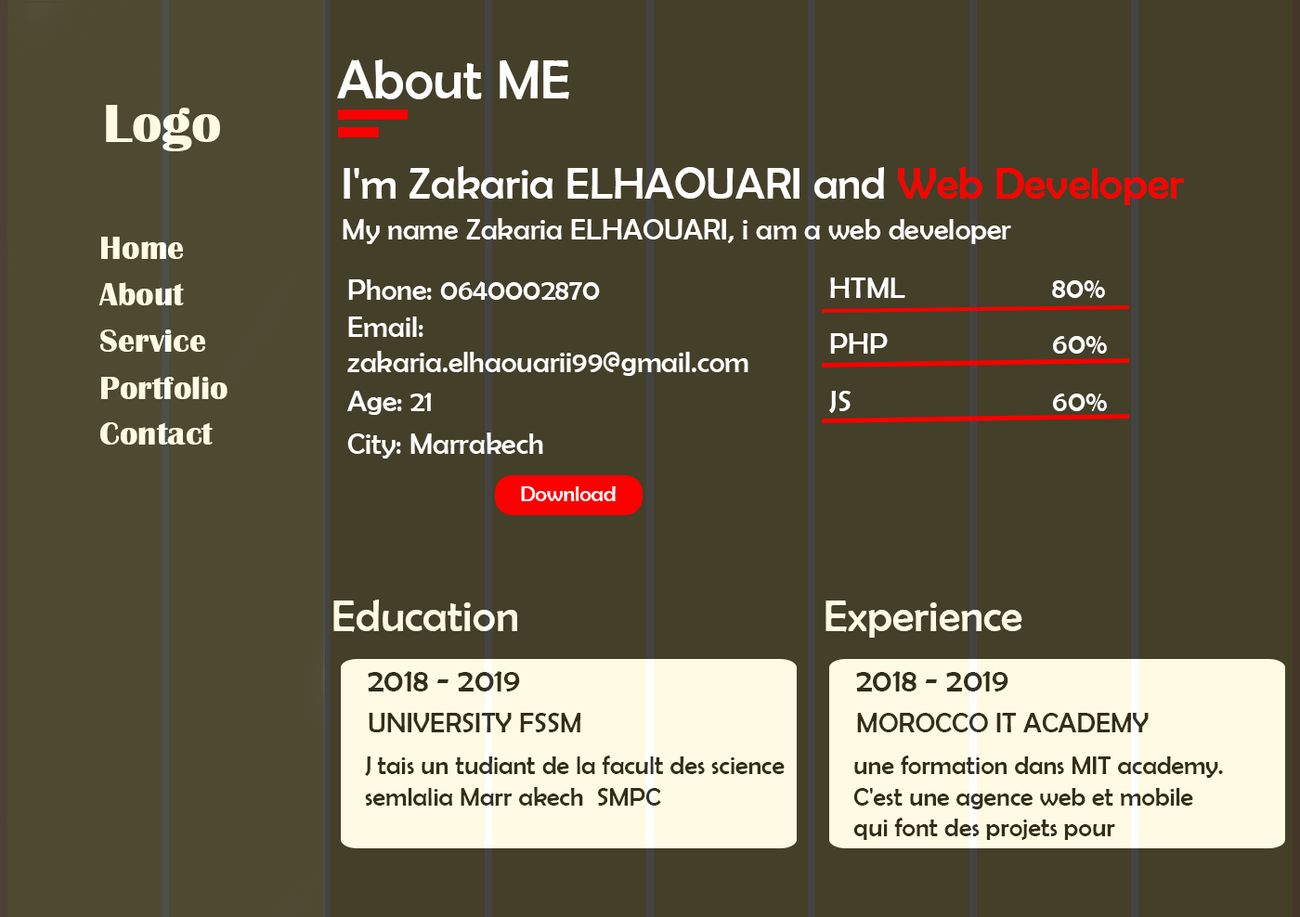
<style>
.page{position:relative;width:1300px;height:917px;background:#443f28}
.page>*{position:absolute;margin:0}
.t1{font:55.7px "BerlinSansFB-Reg";color:#ffffff}
.t2{font:55.7px "BritannicBold";color:#fffae3}
.t3{font:44.6px "BerlinSansFB-Reg";color:#ffffff}
.t4{font:44.6px "BerlinSansFB-Reg";color:#fe0000}
.t5{font:29.7px "BerlinSansFB-Reg";color:#ffffff}
.t6{font:33.4px "BritannicBold";color:#fffae3}
.t7{font:22.3px "BerlinSansFB-Reg";color:#ffffff}
.t8{font:44.6px "BerlinSansFB-Reg";color:#fffae3}
.t9{font:33.4px "BerlinSansFB-Reg";color:#332e17}
.t10{font:27.9px "BerlinSansFB-Reg";color:#332e17}
.t11{font:26px "BerlinSansFB-Reg";color:#332e17}
</style>
<div class="page">
<p class="t1" style="left:337px;top:59px;width:232px;height:40px">About ME</p>
<p class="t2" style="left:106px;top:105px;width:114px;height:46px">Logo</p>
<p class="t3" style="left:344px;top:166px;width:840px;height:39px">I'm Zakaria ELHAOUARI and <span class="t4">Web Developer</span></p>
<p class="t5" style="left:343px;top:218px;width:668px;height:26px">My name Zakaria ELHAOUARI, i am a web developer</p>
<p class="t6" style="left:101px;top:237px;width:82px;height:22px">Home</p>
<p class="t5" style="left:348px;top:279px;width:252px;height:21px">Phone: 0640002870</p>
<p class="t5" style="left:830px;top:278px;width:75px;height:20px">HTML</p>
<p class="t5" style="left:1052px;top:280px;width:53px;height:18px">80%</p>
<p class="t6" style="left:98px;top:282px;width:86px;height:23px">About</p>
<p class="t5" style="left:347px;top:317px;width:401px;height:59px">Email: <br>zakaria.elhaouarii99@gmail.com</p>
<p class="t6" style="left:100px;top:330px;width:105px;height:22px">Service</p>
<p class="t5" style="left:830px;top:333px;width:58px;height:21px">PHP</p>
<p class="t5" style="left:1053px;top:336px;width:54px;height:18px">60%</p>
<p class="t6" style="left:101px;top:376px;width:126px;height:23px">Portfolio</p>
<p class="t5" style="left:347px;top:391px;width:85px;height:24px">Age: 21</p>
<p class="t5" style="left:829px;top:391px;width:21px;height:22px">JS</p>
<p class="t5" style="left:1053px;top:394px;width:54px;height:17px">60%</p>
<p class="t6" style="left:100px;top:422px;width:113px;height:23px">Contact</p>
<p class="t5" style="left:347px;top:433px;width:196px;height:26px">City: Marrakech</p>
<p class="t7" style="left:521px;top:487px;width:95px;height:14px">Download</p>
<p class="t8" style="left:333px;top:600px;width:184px;height:32px">Education</p>
<p class="t8" style="left:825px;top:601px;width:197px;height:37px">Experience</p>
<p class="t9" style="left:368px;top:671px;width:152px;height:22px">2018 - 2019</p>
<p class="t9" style="left:856px;top:671px;width:152px;height:22px">2018 - 2019</p>
<p class="t10" style="left:369px;top:713px;width:212px;height:20px">UNIVERSITY FSSM</p>
<p class="t10" style="left:857px;top:713px;width:292px;height:20px">MOROCCO IT ACADEMY</p>
<p class="t11" style="left:365px;top:756px;width:420px;height:50px">J tais un tudiant de la facult des science <br>semlalia Marr akech  SMPC</p>
<p class="t11" style="left:853px;top:756px;width:370px;height:84px">une formation dans MIT academy. <br>C'est une agence web et mobile <br>qui font des projets pour</p>
</div>
